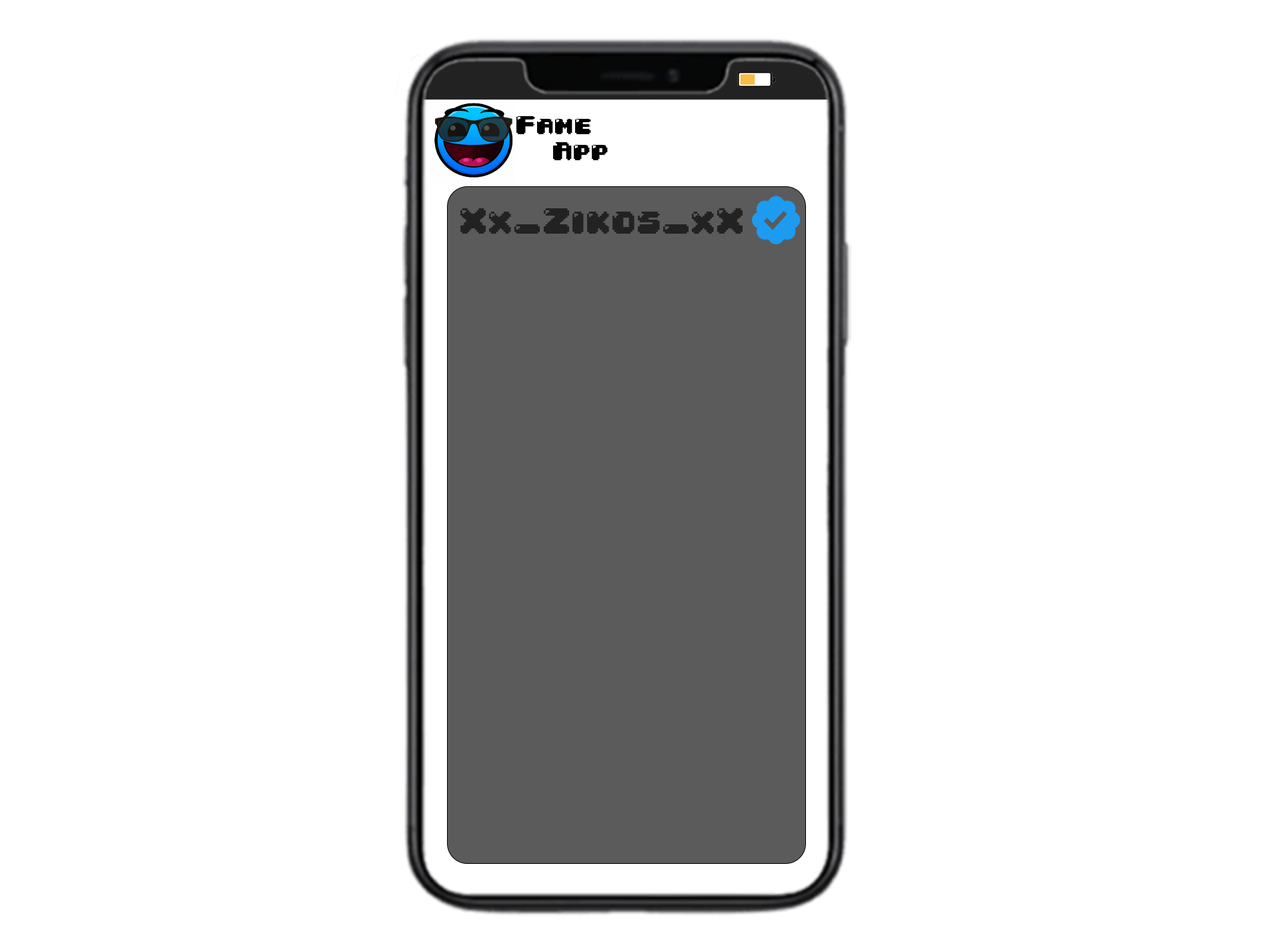
<style>
.page{position:relative;width:1261px;height:946px;background:#ffffff}
.page>*{position:absolute;margin:0}
.t1{font:22.2px "04b30";color:#000000}
.t2{font:30.8px "04b30";color:#222222}
</style>
<div class="page">
<p class="t1" style="left:516px;top:116px;width:92px;height:44px">Fame  <br>  App</p>
<p class="t2" style="left:460px;top:208px;width:283px;height:26px">Xx_Zikos_xX</p>
</div>
